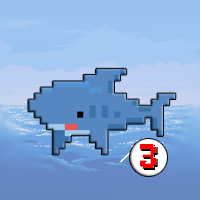
<style>
.page{position:relative;width:200px;height:200px}
.page>*{position:absolute;margin:0}
.t1{font:30px "BrokenConsole-Bold";color:#ff0000}
.t2{font:30px "BrokenConsole-BoldShadow";color:#000000}
</style>
<div class="page">
<p class="t1" style="left:140px;top:144px;width:16px;height:25px">3</p>
<p class="t2" style="left:141px;top:145px;width:17px;height:25px">3</p>
</div>
